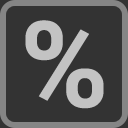
<style>
.page{position:relative;width:128px;height:128px;background:#333333}
.page>*{position:absolute;margin:0}
.t1{font:120px "Roboto-Bold";color:#c3c3c3}
</style>
<div class="page">
<p class="t1" style="left:25px;top:20px;width:79px;height:89px">%</p>
</div>
